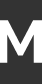
<style>
.page{position:relative;width:42px;height:84px;background:#333333}
.page>*{position:absolute;margin:0}
.t1{font:60px "Raleway-Bold";letter-spacing:0.04em;color:#ffffff}
</style>
<div class="page">
<p class="t1" style="left:0px;top:20px;width:42px;height:43px">M</p>
</div>
